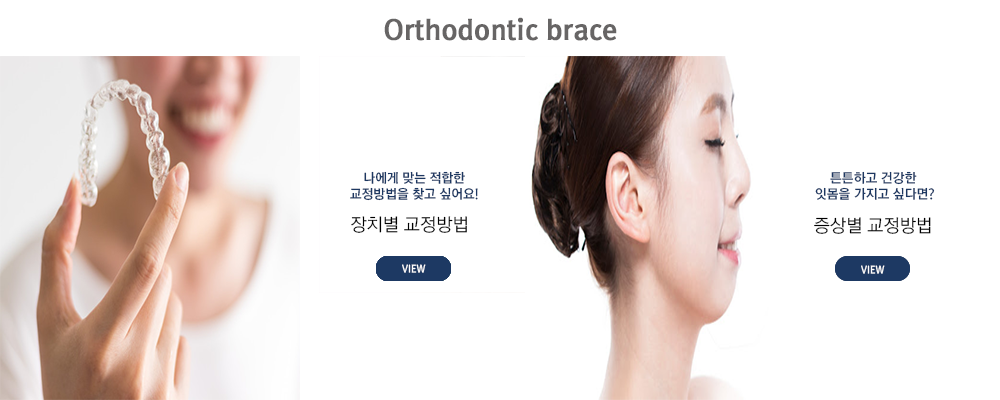
<style>
.page{position:relative;width:1000px;height:400px;background:#ffffff}
.page>*{position:absolute;margin:0}
.t1{font:27px "RixGoB";color:#676565;font-weight:bold}
.t2{font:13px "RixGoB";color:#1d3862}
.t3{font:17.8px "RixGoL";color:#000000}
.t4{font:10.2px "RixGoB";color:#ffffff;scale:0.95 1}
</style>
<div class="page">
<p class="t1" style="left:384px;top:17px;width:233px;height:24px">Orthodontic brace</p>
<p class="t2" style="left:350px;top:171px;width:128px;height:30px;text-align:center">나에게 맞는 적합한 <br>교정방법을 찾고 싶어요!</p>
<p class="t2" style="left:815px;top:171px;width:120px;height:29px;text-align:center">튼튼하고 건강한 <br>잇몸을 가지고 싶다면?</p>
<p class="t3" style="left:351px;top:216px;width:116px;height:17px">장치별 교정방법</p>
<p class="t3" style="left:814px;top:217px;width:117px;height:17px">증상별 교정방법</p>
<p class="t4" style="left:402px;top:264px;width:24px;height:9px">VIEW</p>
<p class="t4" style="left:861px;top:265px;width:24px;height:9px">VIEW</p>
</div>
